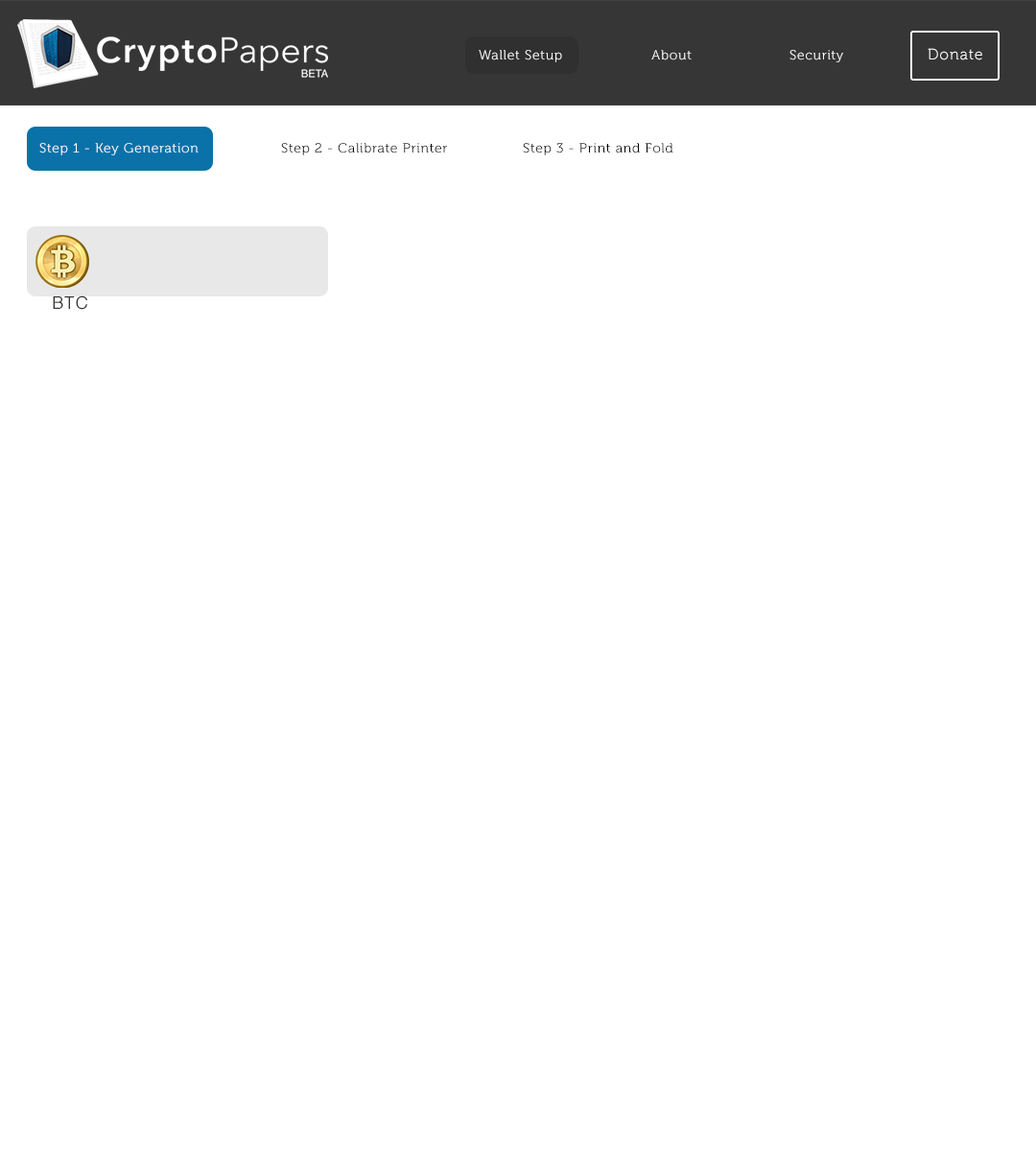
<style>
.page{position:relative;width:1036px;height:1151px;background:#ffffff}
.page>*{position:absolute;margin:0}
.t1{font:13.4px "Museo-300";letter-spacing:0.05em;color:#ffffff}
.t2{font:15.3px "Museo-300";letter-spacing:0.05em;color:#ffffff}
.t3{font:13.4px "Museo-300";letter-spacing:0.05em;color:#000000}
.t4{font:17.3px "Helvetica";letter-spacing:0.05em;color:#353535}
</style>
<div class="page">
<p class="t1" style="left:479px;top:48px;width:503px;height:14px">Wallet Setup   About   Security   <span class="t2">Donate</span></p>
<p class="t3" style="left:39px;top:143px;width:634px;height:12px"><span class="t1">Step 1 - Key Generation   </span>Step 2 - Calibrate Printer   Step 3 - Print and Fold</p>
<p class="t4" style="left:53px;top:295px;width:34px;height:15px">BTC</p>
</div>
